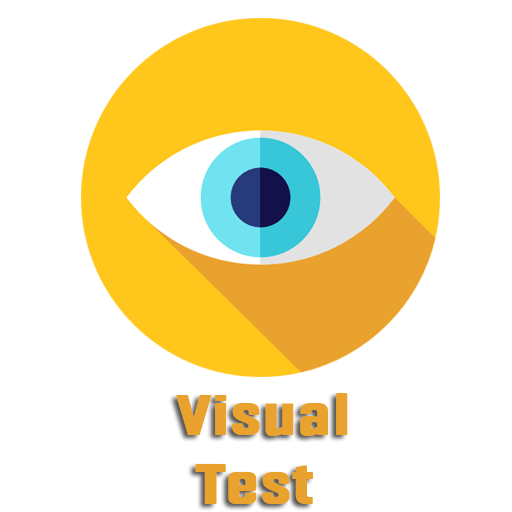
<style>
.page{position:relative;width:512px;height:512px;background:#ffffff}
.page>*{position:absolute;margin:0}
.t1{font:57.1px "Fragua-Bold";color:#eaa22f;font-weight:bold;scale:1.17 1}
</style>
<div class="page">
<p class="t1" style="left:176px;top:393px;width:172px;height:111px;text-align:center">Visual <br>Test</p>
</div>
